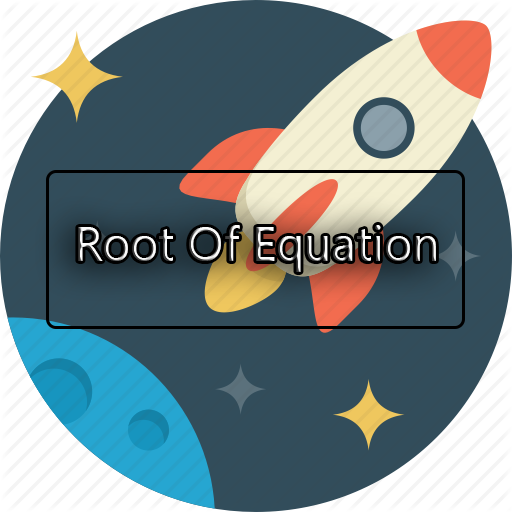
<style>
.page{position:relative;width:512px;height:512px;background:#324d5b}
.page>*{position:absolute;margin:0}
.t1{font:48px "SegoeUI"}
</style>
<div class="page">
<p class="t1" style="left:78px;top:225px;width:358px;height:47px">Root Of Equation</p>
</div>
